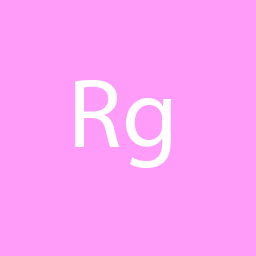
<style>
.page{position:relative;width:256px;height:256px;background:#ff9bf9}
.page>*{position:absolute;margin:0}
.t1{font:100px "MyriadPro-Regular";color:#ffffff}
</style>
<div class="page">
<p class="t1" style="left:75px;top:80px;width:97px;height:88px">Rg</p>
</div>
